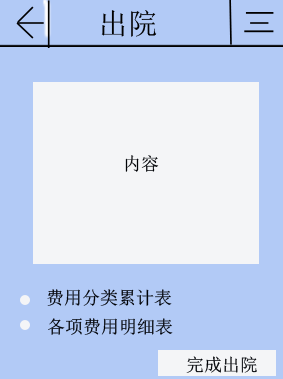
<style>
.page{position:relative;width:283px;height:379px;background:#b2caf6}
.page>*{position:absolute;margin:0}
.t1{font:30.1px "SimSun";color:#000000}
.t2{font:18px "SimSun";color:#000206}
</style>
<div class="page">
<p class="t1" style="left:101px;top:10px;width:56px;height:27px">出院</p>
<p class="t2" style="left:125px;top:155px;width:34px;height:17px">内容</p>
<p class="t2" style="left:47px;top:289px;width:125px;height:17px">费用分类累计表</p>
<p class="t2" style="left:48px;top:318px;width:125px;height:17px">各项费用明细表</p>
<p class="t2" style="left:186px;top:356px;width:71px;height:17px">完成出院</p>
</div>
